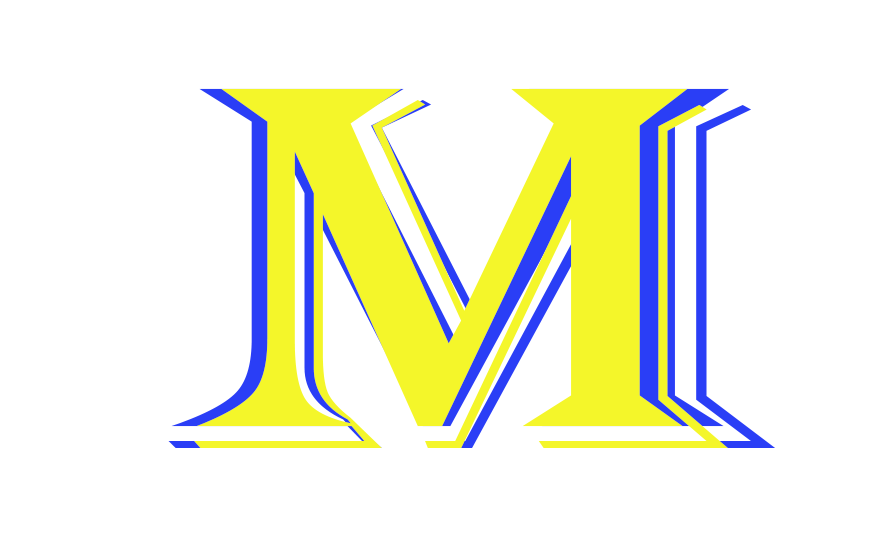
<style>
.page{position:relative;width:873px;height:546px;background:#ffffff}
.page>*{position:absolute;margin:0}
.t1{font:538.1px "Algerian";scale:1.5 1}
.t2{font:538.1px "Algerian";color:#f4f62a;scale:1.32 1}
</style>
<div class="page">
<p class="t1" style="left:168px;top:88px;width:608px;height:360px">M</p>
<p class="t2" style="left:194px;top:88px;width:534px;height:360px">M</p>
</div>
